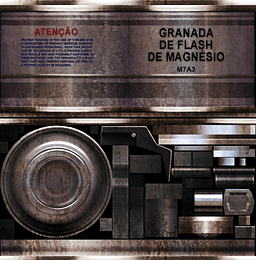
<style>
.page{position:relative;width:256px;height:260px}
.page>*{position:absolute;margin:0}
.t1{font:9.3px "Arial-BoldMT";color:#680e0d;font-weight:bold;scale:0.93 1}
.t2{font:12.1px/12px "Arial-BoldMT";color:#010101;font-weight:bold;scale:0.86 1}
</style>
<div class="page">
<p class="t1" style="left:34px;top:26px;width:44px;height:11px">ATENÇÃO</p>
<p class="t2" style="left:148px;top:28px;width:77px;height:34px;text-align:center">GRANADA<br> DE FLASH <br>DE MAGNÉSIO</p>
</div>
